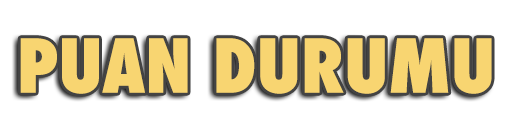
<style>
.page{position:relative;width:512px;height:128px;background:#ffffff}
.page>*{position:absolute;margin:0}
.t1{font:72px "Futura-CondensedExtraBold";color:#f8d571}
</style>
<div class="page">
<p class="t1" style="left:20px;top:38px;width:472px;height:56px">PUAN DURUMU</p>
</div>
